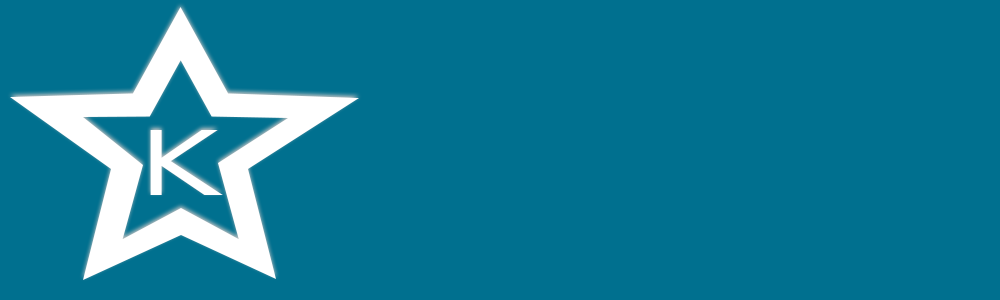
<style>
.page{position:relative;width:1000px;height:300px;background:#00708f}
.page>*{position:absolute;margin:0}
.t1{font:125px "BankGothicBT-Light";color:#ffffff}
</style>
<div class="page">
<p class="t1" style="left:150px;top:130px;width:73px;height:65px">K</p>
</div>
